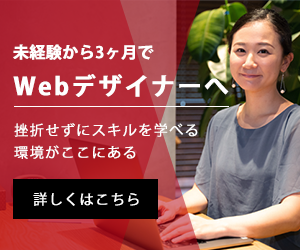
<style>
.page{position:relative;width:300px;height:250px}
.page>*{position:absolute;margin:0}
.t1{font:16px "KozGoPr6N-Bold";color:#fefefe;font-weight:bold}
.t2{font:24px "KozGoPr6N-Bold";letter-spacing:0.08em;color:#fefefe;font-weight:bold}
.t3{font:14px/22.4px "KozGoPr6N-Regular";letter-spacing:0.08em;color:#fefefe;font-weight:bold}
.t4{font:14px "KozGoPr6N-Regular";letter-spacing:0.08em;color:#fefefe;font-weight:bold}
</style>
<div class="page">
<p class="t1" style="left:13px;top:44px;width:141px;height:16px">未経験から3ヶ月で</p>
<p class="t2" style="left:13px;top:74px;width:216px;height:23px">Webデザイナーへ</p>
<p class="t3" style="left:14px;top:123px;width:184px;height:36px">挫折せずにスキルを学べる<br>環境がここにある</p>
<p class="t4" style="left:33px;top:192px;width:106px;height:14px">詳しくはこちら</p>
</div>
